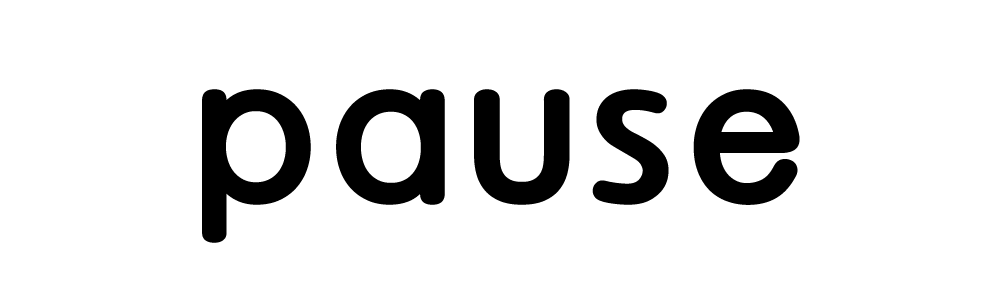
<style>
.page{position:relative;width:1000px;height:300px;background:#ffffff}
.page>*{position:absolute;margin:0}
.t1{font:200px "TTAppgulimR";letter-spacing:0.08em;color:#000000}
</style>
<div class="page">
<p class="t1" style="left:202px;top:89px;width:598px;height:154px">pause</p>
</div>
